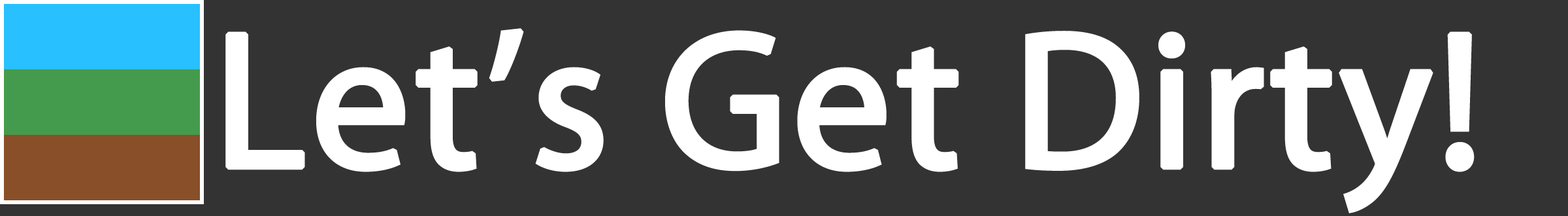
<style>
.page{position:relative;width:1568px;height:216px;background:#333333}
.page>*{position:absolute;margin:0}
.t1{font:196px "MyriadPro-Regular";color:#ffffff;font-weight:bold}
</style>
<div class="page">
<p class="t1" style="left:225px;top:28px;width:1250px;height:185px">Let’s Get Dirty!</p>
</div>
